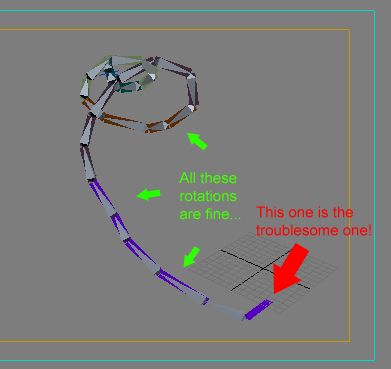
<style>
.page{position:relative;width:391px;height:369px;background:#7d7d7d}
.page>*{position:absolute;margin:0}
.t1{font:15px "ArialMT";color:#42ff00}
.t2{font:15px "ArialMT";color:#ff0000}
</style>
<div class="page">
<p class="t1" style="left:179px;top:172px;width:62px;height:48px">All these <br>rotations <br>are fine...</p>
<p class="t2" style="left:256px;top:206px;width:115px;height:30px">This one is the <br>troublesome one!</p>
</div>
